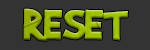
<style>
.page{position:relative;width:150px;height:50px;background:#333333}
.page>*{position:absolute;margin:0}
.t1{font:50px "Brady-Bunch"}
</style>
<div class="page">
<p class="t1" style="left:23px;top:8px;width:105px;height:33px">RESET</p>
</div>
